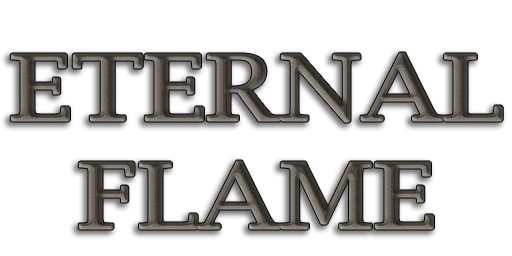
<style>
.page{position:relative;width:512px;height:256px;background:#ffffff}
.page>*{position:absolute;margin:0}
.t1{font:90px "LucidaBright";letter-spacing:-0.02em;text-transform:uppercase;font-weight:bold;scale:1.2 1}
</style>
<div class="page">
<p class="t1" style="left:10px;top:52px;width:493px;height:178px;text-align:center">Eternal<br>Flame</p>
</div>
